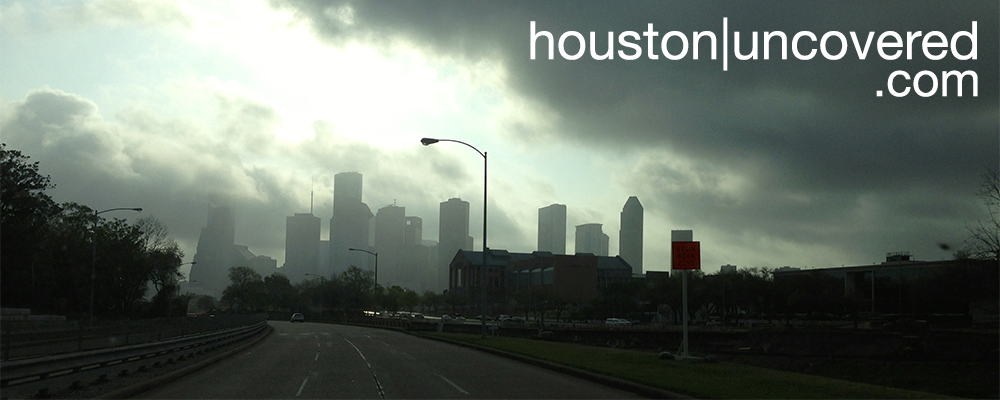
<style>
.page{position:relative;width:1000px;height:400px}
.page>*{position:absolute;margin:0}
.t1{font:52.9px "HelveticaNeue";color:#ffffff}
.t2{font:48px "HelveticaNeue";color:#ffffff}
</style>
<div class="page">
<p class="t1" style="left:530px;top:17px;width:447px;height:54px">houston|uncovered</p>
<p class="t2" style="left:876px;top:70px;width:102px;height:27px">.com</p>
</div>
